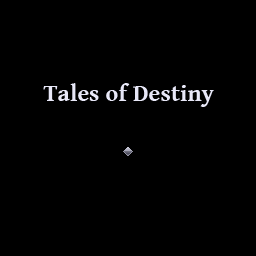
<style>
.page{position:relative;width:256px;height:256px;background:#000000}
.page>*{position:absolute;margin:0}
.t1{font:24px "GentiumBookBasic-Bold";color:#e8e8f8}
</style>
<div class="page">
<p class="t1" style="left:43px;top:83px;width:171px;height:24px">Tales of Destiny</p>
</div>
